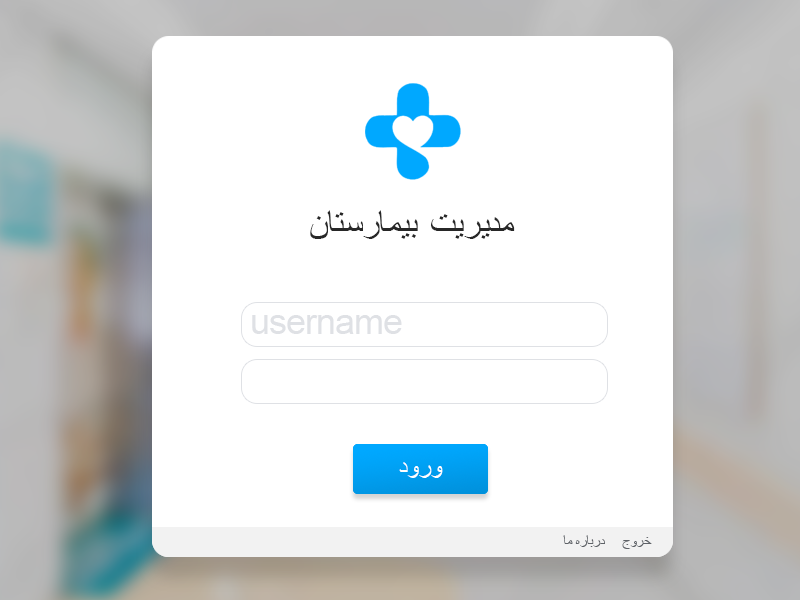
<style>
.page{position:relative;width:800px;height:600px;background:#ffffff}
.page>*{position:absolute;margin:0}
.t1{font:35.5px "ArialMT";letter-spacing:-0.02em;color:#272727}
.t2{font:35.5px "ArialMT";letter-spacing:-0.02em;color:#dfe1e5}
.t3{font:26.2px "ArialMT";letter-spacing:-0.02em;color:#ffffff}
.t4{font:14.5px "ArialMT";letter-spacing:-0.02em;color:#5f6368}
</style>
<div class="page">
<p class="t1" style="left:310px;top:210px;width:205px;height:29px">مدیریت  بیمارستان</p>
<p class="t2" style="left:252px;top:315px;width:150px;height:19px">username</p>
<p class="t3" style="left:399px;top:462px;width:44px;height:16px">ورود</p>
<p class="t4" style="left:563px;top:535px;width:89px;height:14px">خروج     درباره ما</p>
</div>
